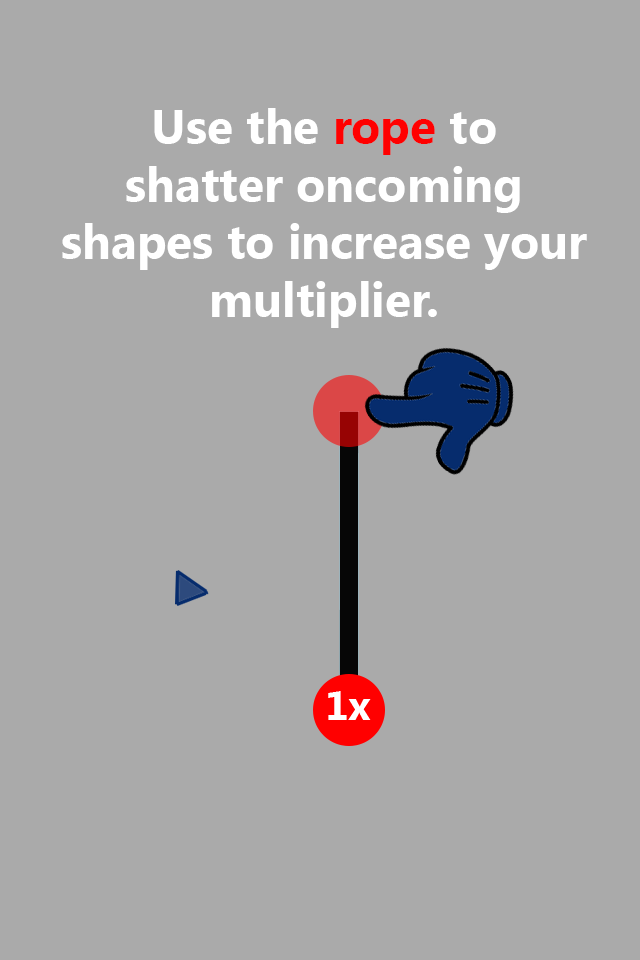
<style>
.page{position:relative;width:640px;height:960px;background:#aaaaaa}
.page>*{position:absolute;margin:0}
.t1{font:48px "LaoUI-Bold";color:#ffffff}
.t2{font:48px "LaoUI-Bold";color:#ff0000}
</style>
<div class="page">
<p class="t1" style="left:62px;top:108px;width:525px;height:220px;text-align:center">Use the <span class="t2">rope</span> to<br>shatter oncoming<br>shapes to increase your<br>multiplier.</p>
</div>
